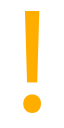
<style>
.page{position:relative;width:64px;height:128px;background:#ffffff}
.page>*{position:absolute;margin:0}
.t1{font:150px "MyriadPro-Regular";color:#ffae00}
</style>
<div class="page">
<p class="t1" style="left:23px;top:11px;width:18px;height:102px">!</p>
</div>
